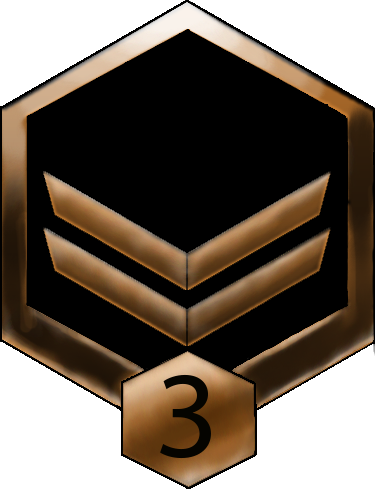
<style>
.page{position:relative;width:375px;height:489px;background:#000000}
.page>*{position:absolute;margin:0}
.t1{font:125px "MyriadPro-Regular";color:#050400}
</style>
<div class="page">
<p class="t1" style="left:160px;top:374px;width:51px;height:85px">3</p>
</div>
